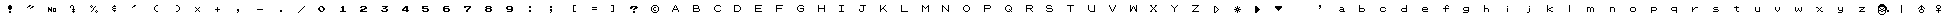
<style>
.page{position:relative;width:1949px;height:19px;background:#ffffff}
.page>*{position:absolute;margin:0}
.t1{font:8px "PokemonTTF";letter-spacing:0.2em;color:#000000}
</style>
<div class="page">
<p class="t1" style="left:8px;top:5px;width:1941px;height:8px">!  "  #  $  %  &amp;  '  (  )  *  +  ,  -  .  /  0  1  2  3  4  5  6  7  8  9  :  ;  &lt;  =  &gt;  ?  @  A  B  C  D  E  F  G  H  I  J  K  L  M  N  O  P  Q  R  S  T  U  V  W  X  Y  Z  [  \  ]  ^  _  `  a  b  c  d  e  f  g  h  i  j  k  l  m  n  o  p  q  r  s  t  u  v  w  x  y  z  {  |  }  ~</p>
</div>
